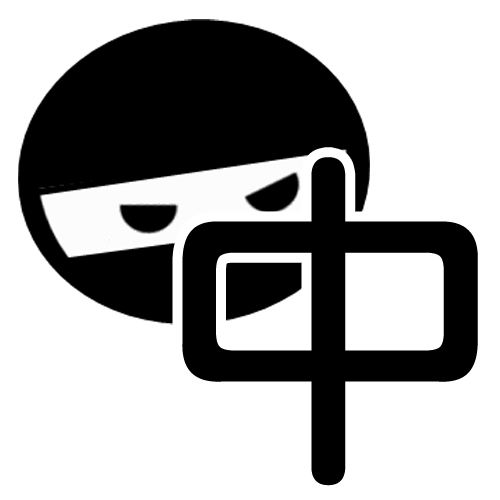
<style>
.page{position:relative;width:500px;height:500px;background:#ffffff}
.page>*{position:absolute;margin:0}
.t1{font:364.6px "jf-openhuninn-1.1";color:#000000;font-weight:bold}
</style>
<div class="page">
<p class="t1" style="left:182px;top:157px;width:296px;height:329px">中</p>
</div>
